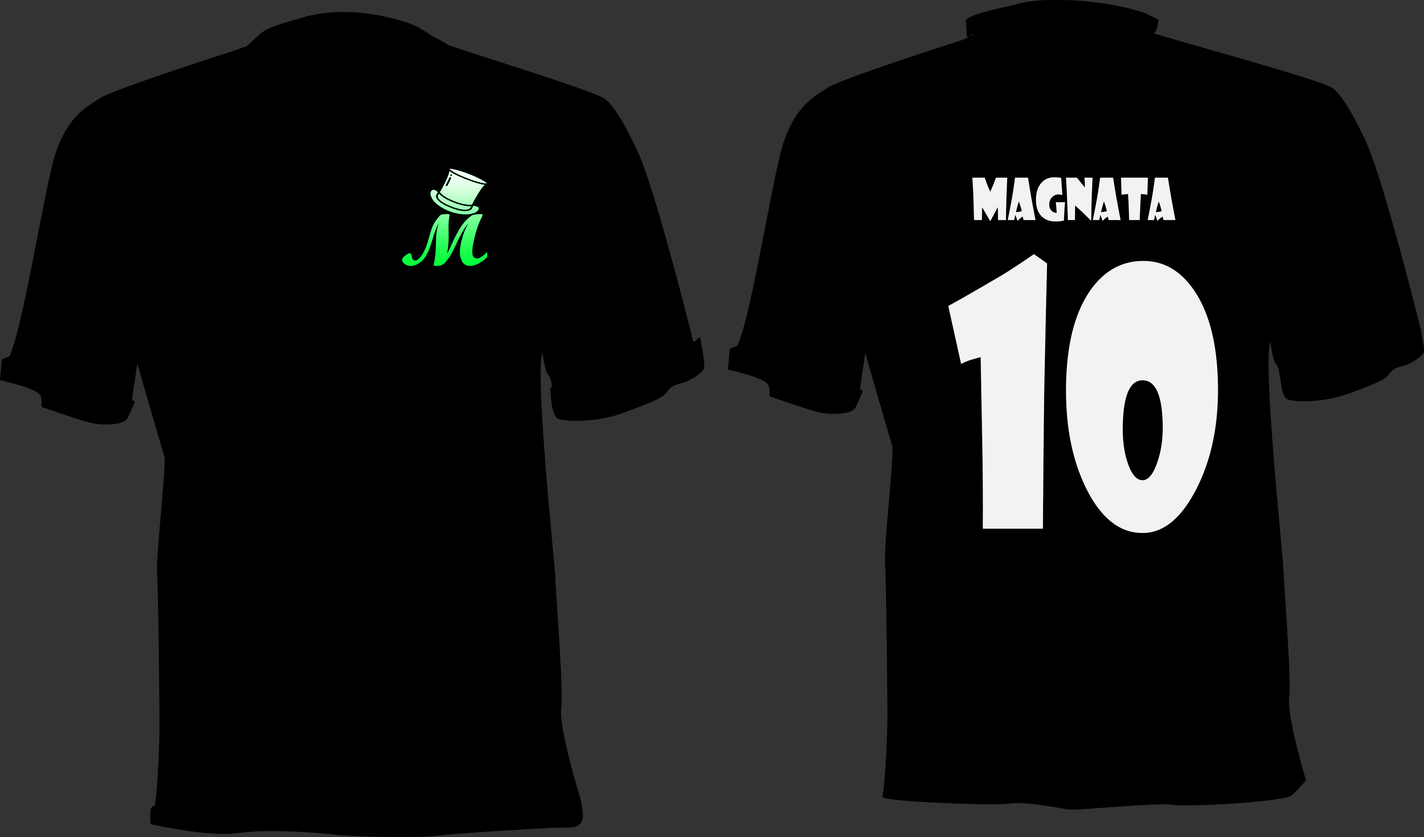
<style>
.page{position:relative;width:1424px;height:837px;background:#000000}
.page>*{position:absolute;margin:0}
.t1{font:56.3px "ShowcardGothic-Reg";color:#f2f2f2;scale:0.78 1}
.t2{font:352px "ShowcardGothic-Reg";color:#f2f2f2;scale:0.78 1}
</style>
<div class="page">
<p class="t1" style="left:972px;top:177px;width:204px;height:44px">magnata</p>
<p class="t2" style="left:948px;top:254px;width:271px;height:279px">10</p>
</div>
